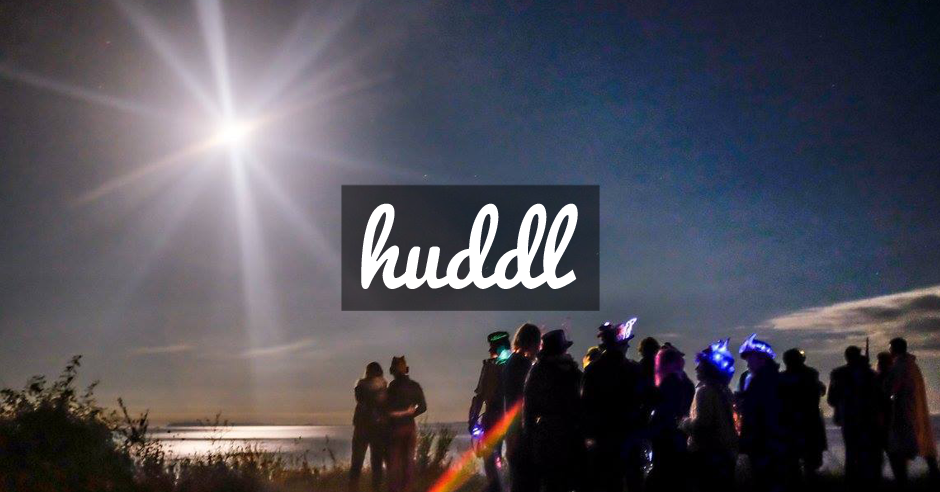
<style>
.page{position:relative;width:940px;height:492px}
.page>*{position:absolute;margin:0}
.t1{font:91px "Pacifico-Regular";color:#ffffff}
</style>
<div class="page">
<p class="t1" style="left:361px;top:203px;width:217px;height:86px">huddl</p>
</div>
